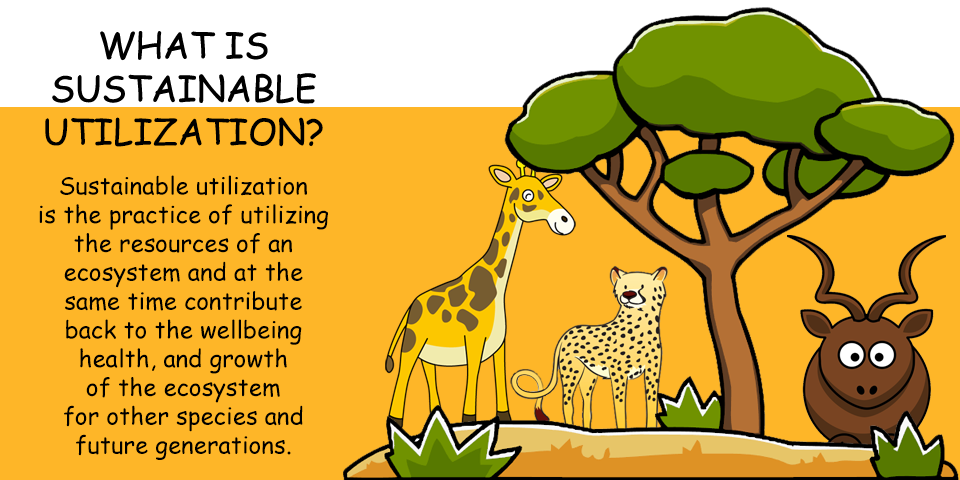
<style>
.page{position:relative;width:960px;height:480px;background:#feb628}
.page>*{position:absolute;margin:0}
.t1{font:36px "ComicSansMS";color:#000000}
.t2{font:24px "ComicSansMS";color:#000000}
</style>
<div class="page">
<p class="t1" style="left:45px;top:31px;width:278px;height:116px;text-align:center">WHAT IS<br>SUSTAINABLE<br>UTILIZATION?</p>
<p class="t2" style="left:39px;top:175px;width:289px;height:285px;text-align:center">Sustainable utilization<br>is the practice of utilizing<br>the resources of an<br>ecosystem and at the<br>same time contribute<br>back to the wellbeing<br>health, and growth<br>of the ecosystem<br>for other species and<br>future generations.</p>
</div>
